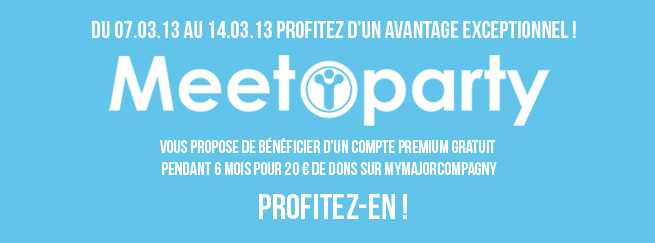
<style>
.page{position:relative;width:655px;height:243px;background:#62c4eb}
.page>*{position:absolute;margin:0}
.t1{font:24px "BebasNeue";color:#ffffff}
.t2{font:18px "BebasNeue";color:#ffffff}
.t3{font:36px "BebasNeue";color:#ffffff}
</style>
<div class="page">
<p class="t1" style="left:92px;top:21px;width:484px;height:17px">Du 07.03.13 au 14.03.13 profitez d’un avantage exceptionnel !</p>
<p class="t2" style="left:160px;top:137px;width:337px;height:38px;text-align:center">vous propose de bénéficier d’un compte premium gratuit <br>pendant 6 mois pour 20 € de dons sur MyMajorCompagny</p>
<p class="t3" style="left:259px;top:194px;width:148px;height:25px">PROFITEZ-EN !</p>
</div>
